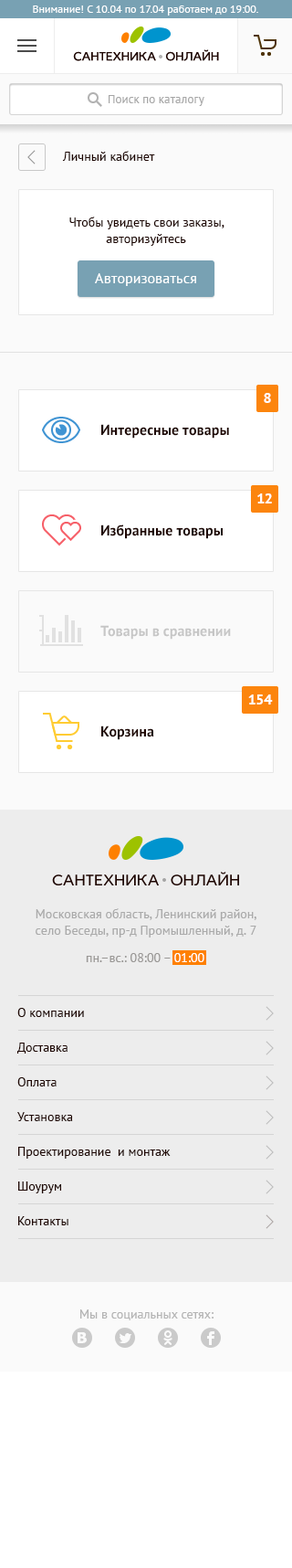
<style>
.page{position:relative;width:292px;height:1568px;background:#ffffff}
.page>*{position:absolute;margin:0}
.t1{font:11px "PTSans-Regular";color:#ffffff}
.t2{font:12.8px "IdealistSans";color:#1e0602;text-transform:uppercase}
.t3{font:11.9px "PTSans-Regular";color:#a6a6a6}
.t4{font:12.8px "PTSans-Regular";color:#1e0602}
.t5{font:12.8px/16.4px "PTSans-Regular";color:#1e0602}
.t6{font:14.6px "PTSans-Regular";color:#ffffff}
.t7{font:14.6px "PTSans-Bold";color:#ffffff}
.t8{font:14.6px "PTSans-Bold";color:#1e0602}
.t9{font:14.6px "PTSans-Bold";color:#c6c6c6}
.t10{font:16.4px "IdealistSans";color:#1e0602;text-transform:uppercase}
.t11{font:12.8px/16.4px "PTSans-Regular";color:#aaaaaa}
.t12{font:12.8px "PTSans-Regular";color:#999795}
.t13{font:12.8px "PTSans-Regular";color:#ffffff}
.t14{font:12.8px "PTSans-Regular";color:#b4b4b4}
</style>
<div class="page">
<p class="t1" style="left:33px;top:5px;width:226px;height:11px">Внимание! С 10.04 по 17.04 работаем до 19:00.</p>
<p class="t2" style="left:73px;top:49px;width:146px;height:12px">сантехника  онлайн</p>
<p class="t3" style="left:109px;top:95px;width:96px;height:11px">Поиск по каталогу</p>
<p class="t4" style="left:62px;top:151px;width:93px;height:10px">Личный кабинет</p>
<p class="t5" style="left:69px;top:217px;width:156px;height:29px;text-align:center">Чтобы увидеть свои заказы,<br>авторизуйтесь</p>
<p class="t6" style="left:95px;top:273px;width:101px;height:13px">Авторизоваться</p>
<p class="t7" style="left:264px;top:393px;width:7px;height:10px">8</p>
<p class="t8" style="left:101px;top:424px;width:128px;height:15px">Интересные товары</p>
<p class="t7" style="left:258px;top:493px;width:14px;height:10px">12</p>
<p class="t8" style="left:101px;top:524px;width:122px;height:15px">Избранные товары</p>
<p class="t9" style="left:101px;top:625px;width:130px;height:15px">Товары в сравнении</p>
<p class="t7" style="left:249px;top:694px;width:24px;height:11px">154</p>
<p class="t8" style="left:101px;top:726px;width:53px;height:14px">Корзина</p>
<p class="t10" style="left:52px;top:872px;width:187px;height:13px">сантехника  онлайн</p>
<p class="t11" style="left:36px;top:908px;width:221px;height:30px;text-align:center">Московская область, Ленинский район,<br>село Беседы, пр-д Промышленный, д. 7</p>
<p class="t12" style="left:86px;top:953px;width:119px;height:9px">пн.–вc.: 08:00 – <span class="t13">01:00</span></p>
<p class="t5" style="left:17px;top:1008px;width:154px;height:217px">О компании<br>Доставка<br>Оплата<br>Установка<br>Проектирование  и монтаж<br>Шоурум<br>Контакты</p>
<p class="t14" style="left:80px;top:1309px;width:134px;height:11px">Мы в социальных сетях:</p>
</div>
